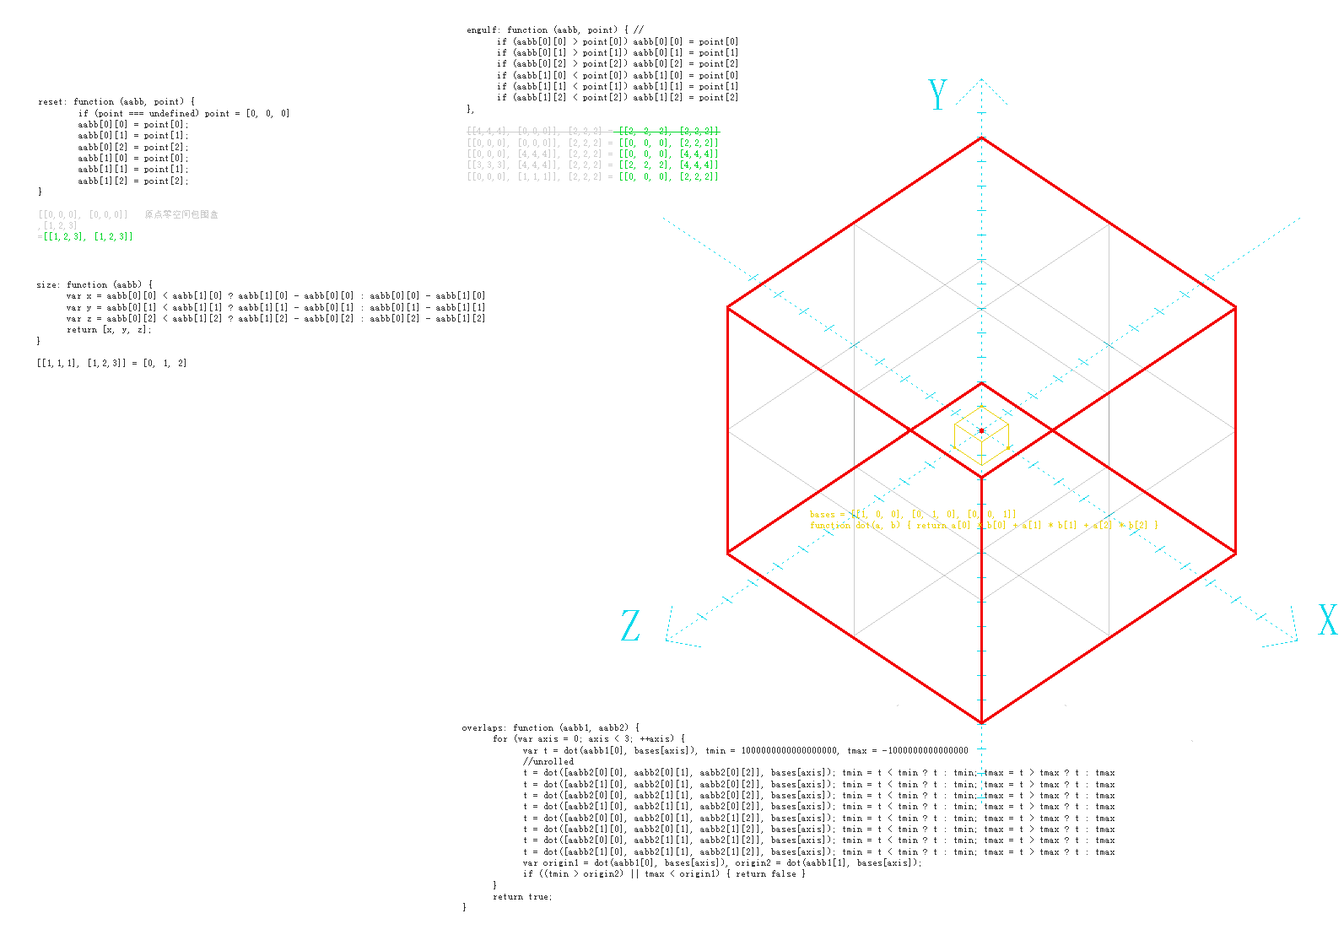
<style>
.page{position:relative;width:1344px;height:935px;background:#ffffff}
.page>*{position:absolute;margin:0}
.t1{font:9px/11.3px "SimSun";color:#333333}
.t2{font:9px/11.3px "SimSun";color:#cccccc}
.t3{font:9px/11.3px "SimSun";color:#03d72b}
.t4{font:9px/11.3px "SimSun";color:#ecd303}
</style>
<div class="page">
<p class="t1" style="left:467px;top:25px;width:270px;height:156px">engulf: function (aabb, point) { // <br> if (aabb[0][0] &gt; point[0]) aabb[0][0] = point[0]<br> if (aabb[0][1] &gt; point[1]) aabb[0][1] = point[1]<br> if (aabb[0][2] &gt; point[2]) aabb[0][2] = point[2]<br> if (aabb[1][0] &lt; point[0]) aabb[1][0] = point[0]<br> if (aabb[1][1] &lt; point[1]) aabb[1][1] = point[1]<br> if (aabb[1][2] &lt; point[2]) aabb[1][2] = point[2]<br>},<br><br><span class="t2">[[4,4,4], [0,0,0]], [2,2,2] =</span><span class="t3"> [[2, 2, 2], [2,2,2]]<br></span><span class="t2">[[0,0,0], [0,0,0]], [2,2,2] =</span><span class="t3"> [[0, 0, 0], [2,2,2]]<br></span><span class="t2">[[0,0,0], [4,4,4]], [2,2,2] =</span><span class="t3"> [[0, 0, 0], [4,4,4]]<br></span><span class="t2">[[3,3,3], [4,4,4]], [2,2,2] =</span><span class="t3"> [[2, 2, 2], [4,4,4]]<br></span><span class="t2">[[0,0,0], [1,1,1]], [2,2,2] =</span><span class="t3"> [[0, 0, 0], [2,2,2]]</span></p>
<p class="t1" style="left:38px;top:97px;width:251px;height:144px">reset: function (aabb, point) {<br>        if (point === undefined) point = [0, 0, 0]<br>        aabb[0][0] = point[0];<br>        aabb[0][1] = point[1];<br>        aabb[0][2] = point[2];<br>        aabb[1][0] = point[0];<br>        aabb[1][1] = point[1];<br>        aabb[1][2] = point[2];<br>}<br><br><span class="t2">[[0,0,0], [0,0,0]]   原点零空间包围盒<br>,[1,2,3] <br>=</span><span class="t3">[[1,2,3], [1,2,3]]</span></p>
<p class="t1" style="left:37px;top:280px;width:447px;height:88px">size: function (aabb) {<br> var x = aabb[0][0] &lt; aabb[1][0] ? aabb[1][0] - aabb[0][0] : aabb[0][0] - aabb[1][0]<br> var y = aabb[0][1] &lt; aabb[1][1] ? aabb[1][1] - aabb[0][1] : aabb[0][1] - aabb[1][1]<br> var z = aabb[0][2] &lt; aabb[1][2] ? aabb[1][2] - aabb[0][2] : aabb[0][2] - aabb[1][2]<br> return [x, y, z];<br>}<br><br>[[1,1,1], [1,2,3]] = [0, 1, 2]</p>
<p class="t4" style="left:810px;top:510px;width:347px;height:20px">bases = [[1, 0, 0], [0, 1, 0], [0, 0, 1]]<br>function dot(a, b) { return a[0] * b[0] + a[1] * b[1] + a[2] * b[2] }</p>
<p class="t1" style="left:462px;top:723px;width:652px;height:188px">overlaps: function (aabb1, aabb2) {<br> for (var axis = 0; axis &lt; 3; ++axis) {<br>  var t = dot(aabb1[0], bases[axis]), tmin = 1000000000000000000, tmax = -1000000000000000<br>  //unrolled<br>  t = dot([aabb2[0][0], aabb2[0][1], aabb2[0][2]], bases[axis]); tmin = t &lt; tmin ? t : tmin; tmax = t &gt; tmax ? t : tmax<br>            t = dot([aabb2[1][0], aabb2[0][1], aabb2[0][2]], bases[axis]); tmin = t &lt; tmin ? t : tmin; tmax = t &gt; tmax ? t : tmax<br>            t = dot([aabb2[0][0], aabb2[1][1], aabb2[0][2]], bases[axis]); tmin = t &lt; tmin ? t : tmin; tmax = t &gt; tmax ? t : tmax<br>            t = dot([aabb2[1][0], aabb2[1][1], aabb2[0][2]], bases[axis]); tmin = t &lt; tmin ? t : tmin; tmax = t &gt; tmax ? t : tmax<br>            t = dot([aabb2[0][0], aabb2[0][1], aabb2[1][2]], bases[axis]); tmin = t &lt; tmin ? t : tmin; tmax = t &gt; tmax ? t : tmax<br>            t = dot([aabb2[1][0], aabb2[0][1], aabb2[1][2]], bases[axis]); tmin = t &lt; tmin ? t : tmin; tmax = t &gt; tmax ? t : tmax<br>            t = dot([aabb2[0][0], aabb2[1][1], aabb2[1][2]], bases[axis]); tmin = t &lt; tmin ? t : tmin; tmax = t &gt; tmax ? t : tmax<br>            t = dot([aabb2[1][0], aabb2[1][1], aabb2[1][2]], bases[axis]); tmin = t &lt; tmin ? t : tmin; tmax = t &gt; tmax ? t : tmax<br>            var origin1 = dot(aabb1[0], bases[axis]), origin2 = dot(aabb1[1], bases[axis]);<br>            if ((tmin &gt; origin2) || tmax &lt; origin1) { return false }<br> }<br> return true;<br>}</p>
</div>
